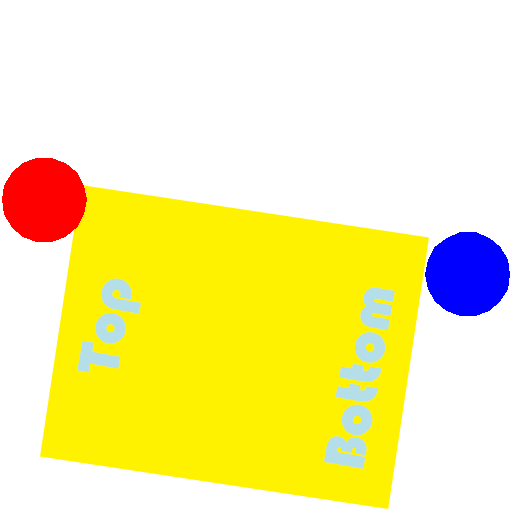
<style>
.page{position:relative;width:512px;height:512px;background:#ffffff}
.page>*{position:absolute;margin:0}
.t1{font:60px "Bauhaus93";color:#b4dee8}
</style>
<div class="page">
<p class="t1" style="left:77px;top:278px;width:64px;height:95px;rotate:-80deg">Top</p>
<p class="t1" style="left:324px;top:287px;width:71px;height:182px;rotate:-80deg">Bottom</p>
</div>
